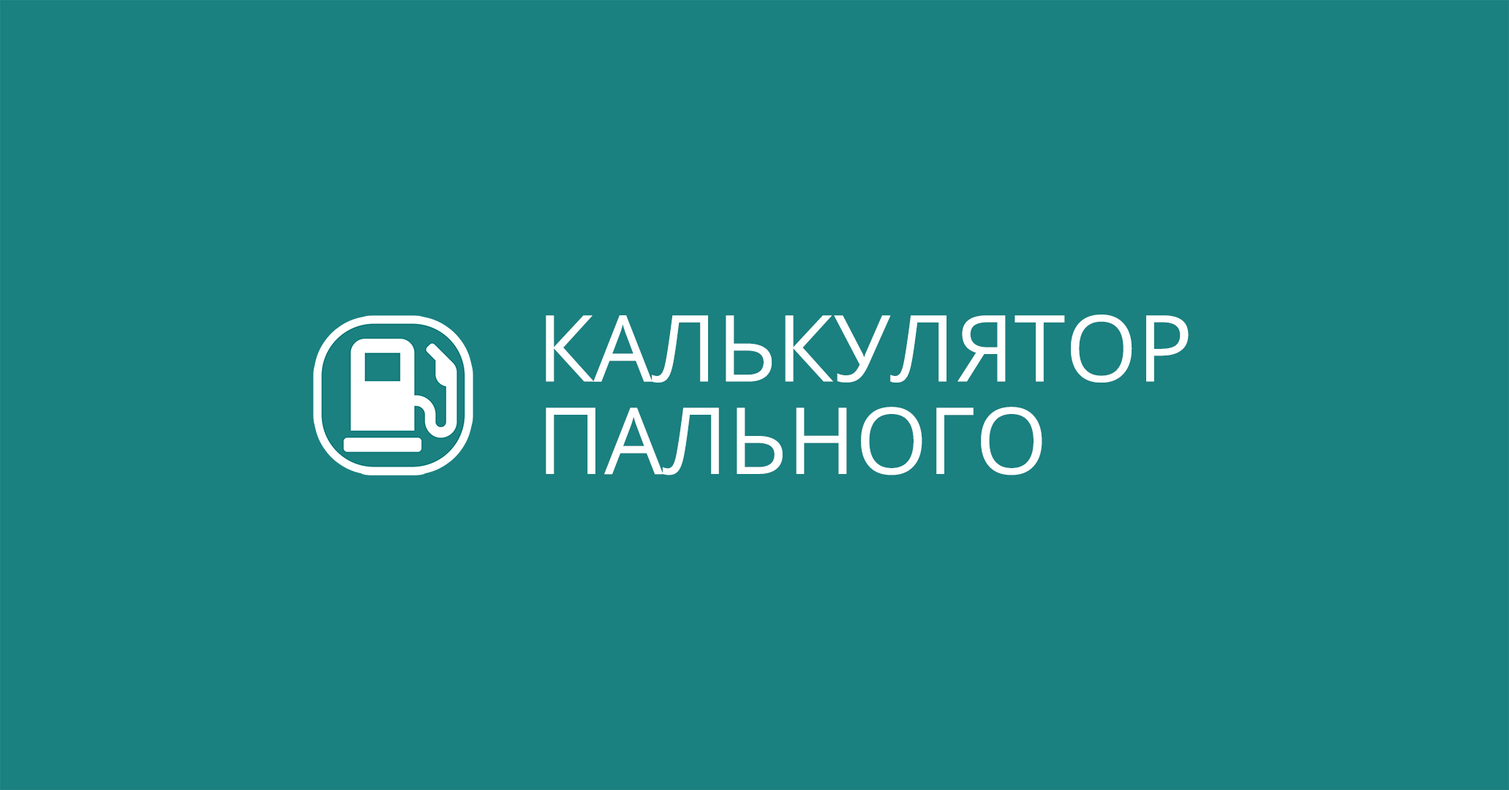
<style>
.page{position:relative;width:1509px;height:790px;background:#1a8080}
.page>*{position:absolute;margin:0}
.t1{font:92.4px/92.4px "OpenSans-Regular";color:#ffffff}
</style>
<div class="page">
<p class="t1" style="left:546px;top:315px;width:643px;height:161px">КАЛЬКУЛЯТОР<br>ПАЛЬНОГО</p>
</div>
